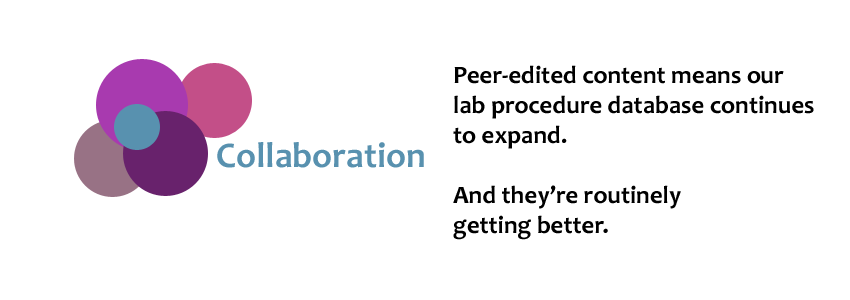
<style>
.page{position:relative;width:850px;height:300px;background:#ffffff}
.page>*{position:absolute;margin:0}
.t1{font:25px "Candara-Bold";color:#000000}
.t2{font:36px "Candara-Bold";color:#5891af}
</style>
<div class="page">
<p class="t1" style="left:453px;top:65px;width:361px;height:175px">Peer-edited content means our <br>lab procedure database continues <br>to expand.<br><br>And they’re routinely<br>getting better.</p>
<p class="t2" style="left:217px;top:142px;width:207px;height:26px">Collaboration</p>
</div>
